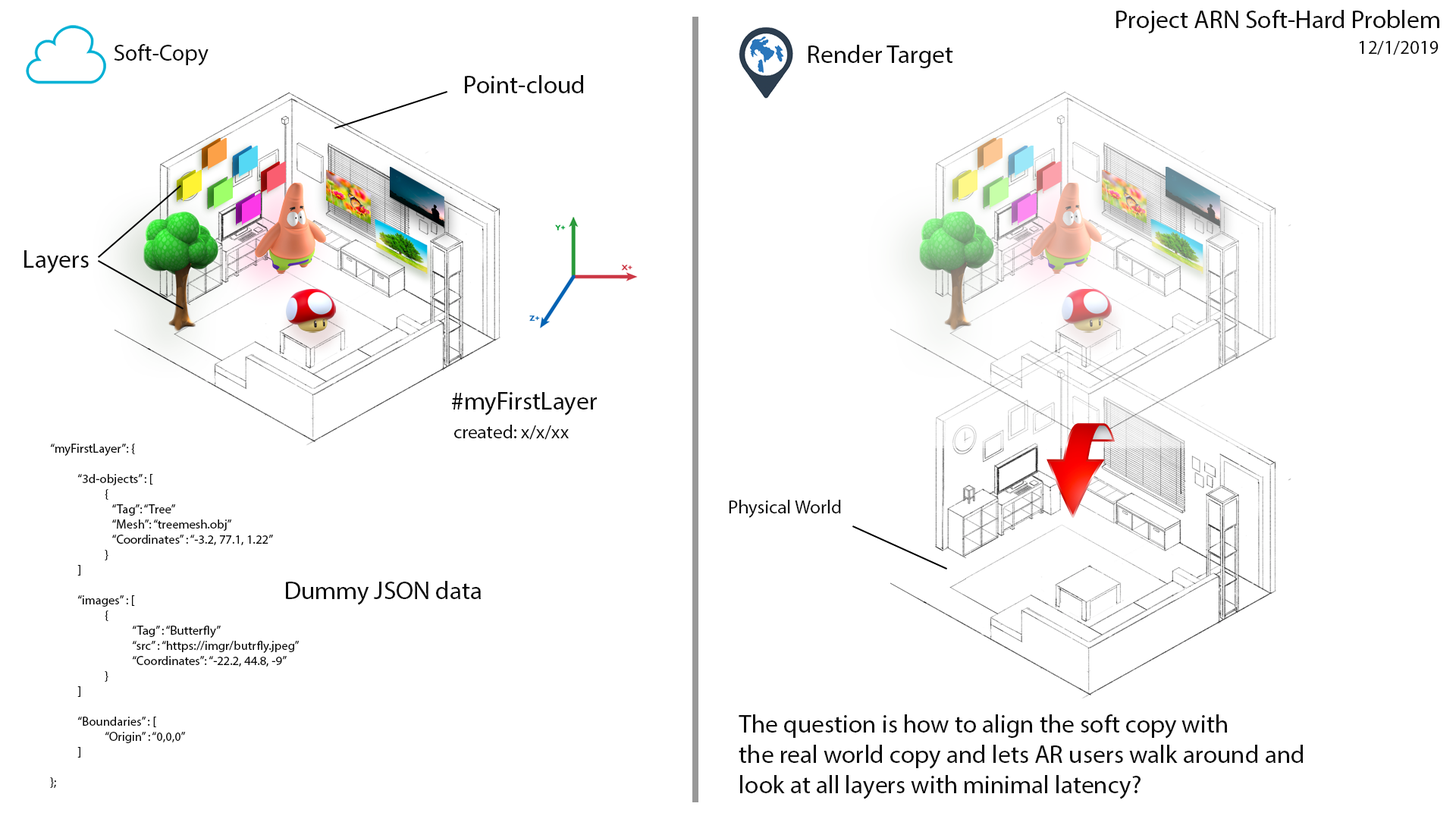
<style>
.page{position:relative;width:1456px;height:819px;background:#ffffff}
.page>*{position:absolute;margin:0}
.t1{font:25.3px "MyriadPro-Regular";color:#0b0b0b}
.t2{font:19px "MyriadPro-Regular";color:#0b0b0b}
.t3{font:23px "MyriadPro-Regular";color:#0b0b0b}
.t4{font:12.6px "MyriadPro-Regular";color:#0b0b0b}
</style>
<div class="page">
<p class="t1" style="left:1116px;top:10px;width:323px;height:23px">Project ARN Soft-Hard Problem</p>
<p class="t2" style="left:1359px;top:41px;width:80px;height:14px">12/1/2019</p>
<p class="t3" style="left:114px;top:44px;width:95px;height:22px">Soft-Copy</p>
<p class="t1" style="left:808px;top:45px;width:145px;height:23px">Render Target</p>
<p class="t1" style="left:465px;top:75px;width:118px;height:18px">Point-cloud</p>
<p class="t1" style="left:24px;top:250px;width:65px;height:24px">Layers</p>
<p class="t1" style="left:452px;top:392px;width:145px;height:24px">#myFirstLayer</p>
<p class="t2" style="left:454px;top:425px;width:115px;height:15px">created: x/x/xx</p>
<p class="t4" style="left:50px;top:444px;width:250px;height:345px">“myFirstLayer”: {<br><br> “3d-objects” : [<br>  {<br>     “Tag”: “Tree”<br>     “Mesh”: “treemesh.obj”<br>     “Coordinates” : “-3.2, 77.1, 1.22”<br>  }<br> ]<br><br> “images” : [<br>  {<br>   “Tag” : “Butterfly”<br>   “src” : “https://imgr/butrfly.jpeg”<br>   “Coordinates”: “-22.2, 44.8, -9”<br>  }<br> ]<br><br> “Boundaries” : [<br>  “Origin” : “0,0,0” <br> ]<br><br>};</p>
<p class="t2" style="left:729px;top:500px;width:112px;height:18px">Physical World</p>
<p class="t1" style="left:286px;top:581px;width:195px;height:24px">Dummy JSON data</p>
<p class="t1" style="left:739px;top:714px;width:564px;height:85px">The question is how to align the soft copy with <br>the real world copy and lets AR users walk around and <br>look at all layers with minimal latency?</p>
</div>
